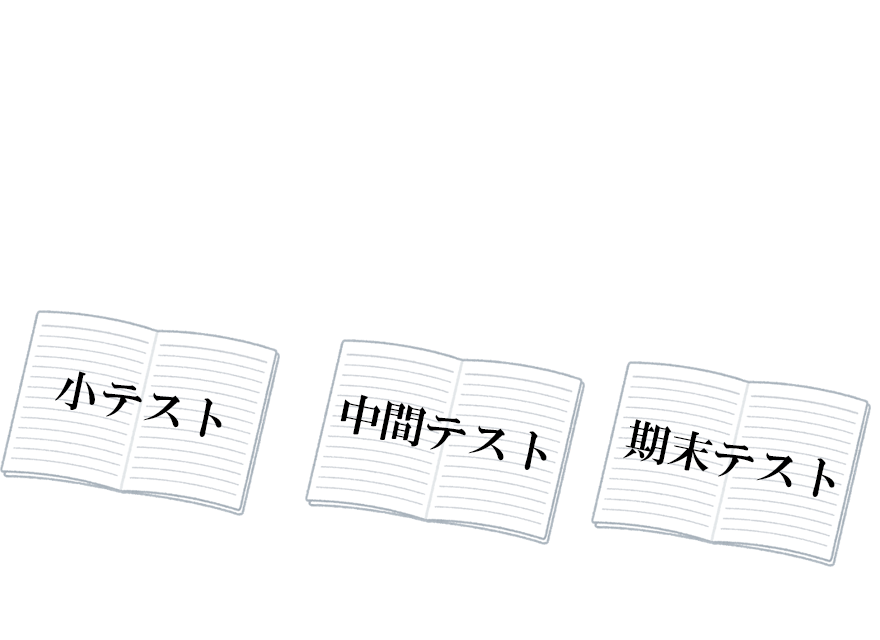
<style>
.page{position:relative;width:880px;height:640px;background:#ffffff}
.page>*{position:absolute;margin:0}
.t1{font:44.2px "HGMinchoE";color:#000000}
</style>
<div class="page">
<p class="t1" style="left:55px;top:371px;width:167px;height:66px;rotate:12deg">小テスト</p>
<p class="t1" style="left:340px;top:394px;width:207px;height:76px;rotate:12deg">中間テスト</p>
<p class="t1" style="left:623px;top:419px;width:212px;height:78px;rotate:12deg">期末テスト</p>
</div>
